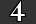
<style>
.page{position:relative;width:36px;height:24px;background:#333333}
.page>*{position:absolute;margin:0}
.t1{font:34px "Perpetua-Bold";color:#ffffff}
</style>
<div class="page">
<p class="t1" style="left:10px;top:1px;width:15px;height:20px">4</p>
</div>
